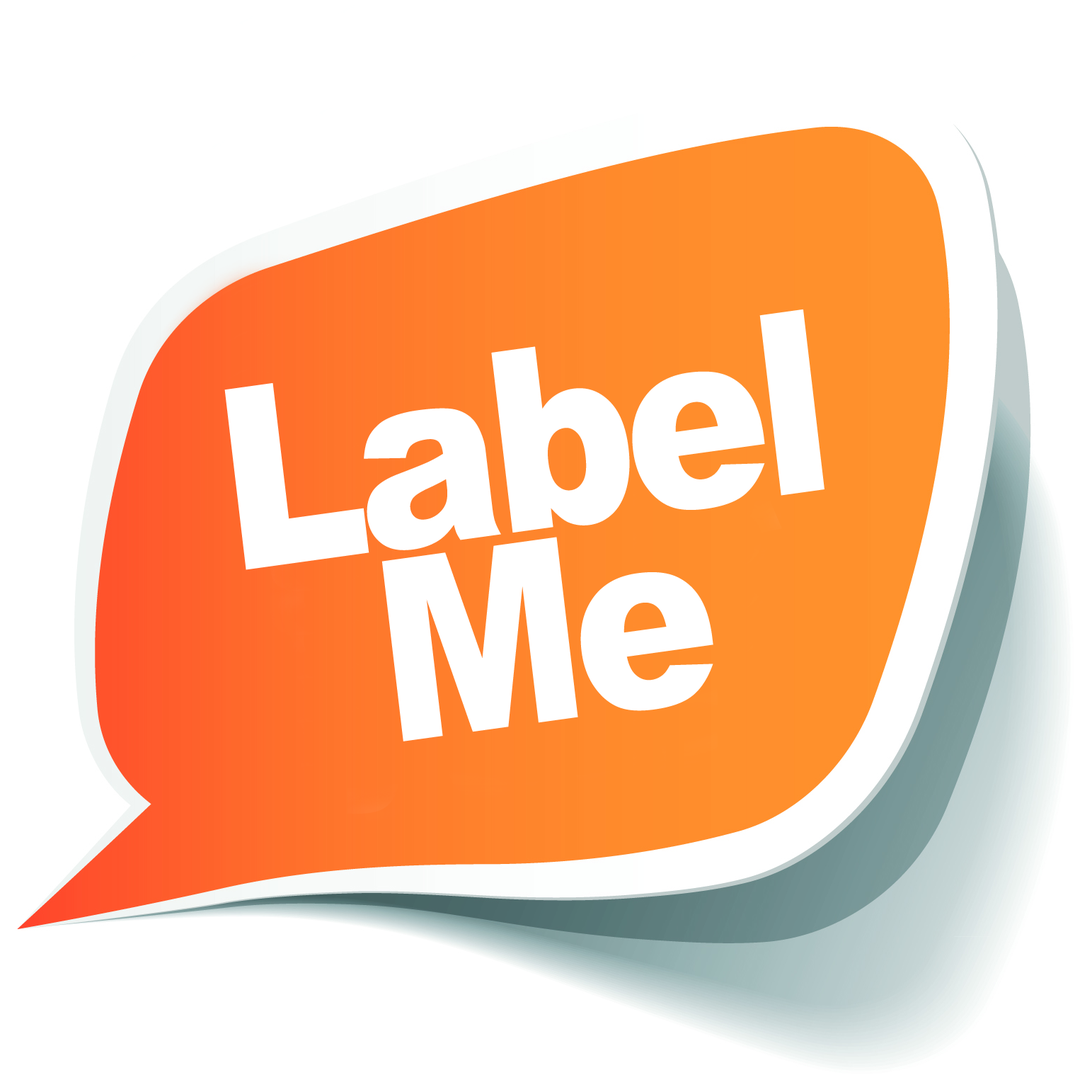
<style>
.page{position:relative;width:1092px;height:1092px;background:#ffffff}
.page>*{position:absolute;margin:0}
.t1{font:252.9px/191.6px "Arial-Black";letter-spacing:-0.05em;color:#ffffff;scale:0.86 1}
</style>
<div class="page">
<p class="t1" style="left:224px;top:309px;width:601px;height:432px;text-align:center;rotate:-8deg">Label<br>Me</p>
</div>
